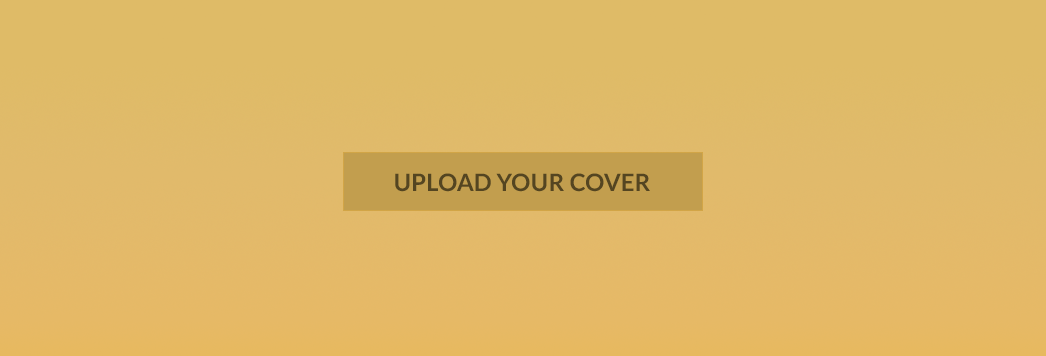
<style>
.page{position:relative;width:1046px;height:356px;background:#dfbb67}
.page>*{position:absolute;margin:0}
.t1{font:24px "Lato-Bold";color:#3e3319;text-transform:uppercase}
</style>
<div class="page">
<p class="t1" style="left:395px;top:173px;width:255px;height:19px;opacity:0.88">Upload Your Cover</p>
</div>
